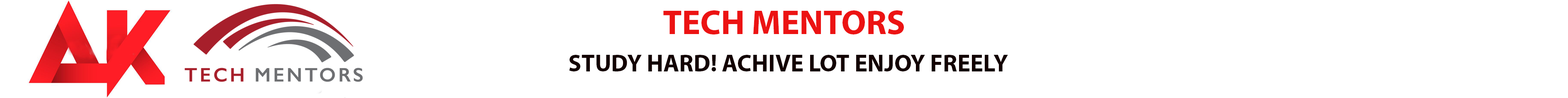
<style>
.page{position:relative;width:1568px;height:98px;background:#ffffff}
.page>*{position:absolute;margin:0}
.t1{font:34.6px "MyriadPro-Bold";color:#ec1313}
.t2{font:24.2px "MyriadPro-Bold";color:#130101}
</style>
<div class="page">
<p class="t1" style="left:663px;top:10px;width:241px;height:24px">TECH MENTORS</p>
<p class="t2" style="left:569px;top:55px;width:439px;height:16px">STUDY HARD! ACHIVE LOT ENJOY FREELY</p>
</div>
